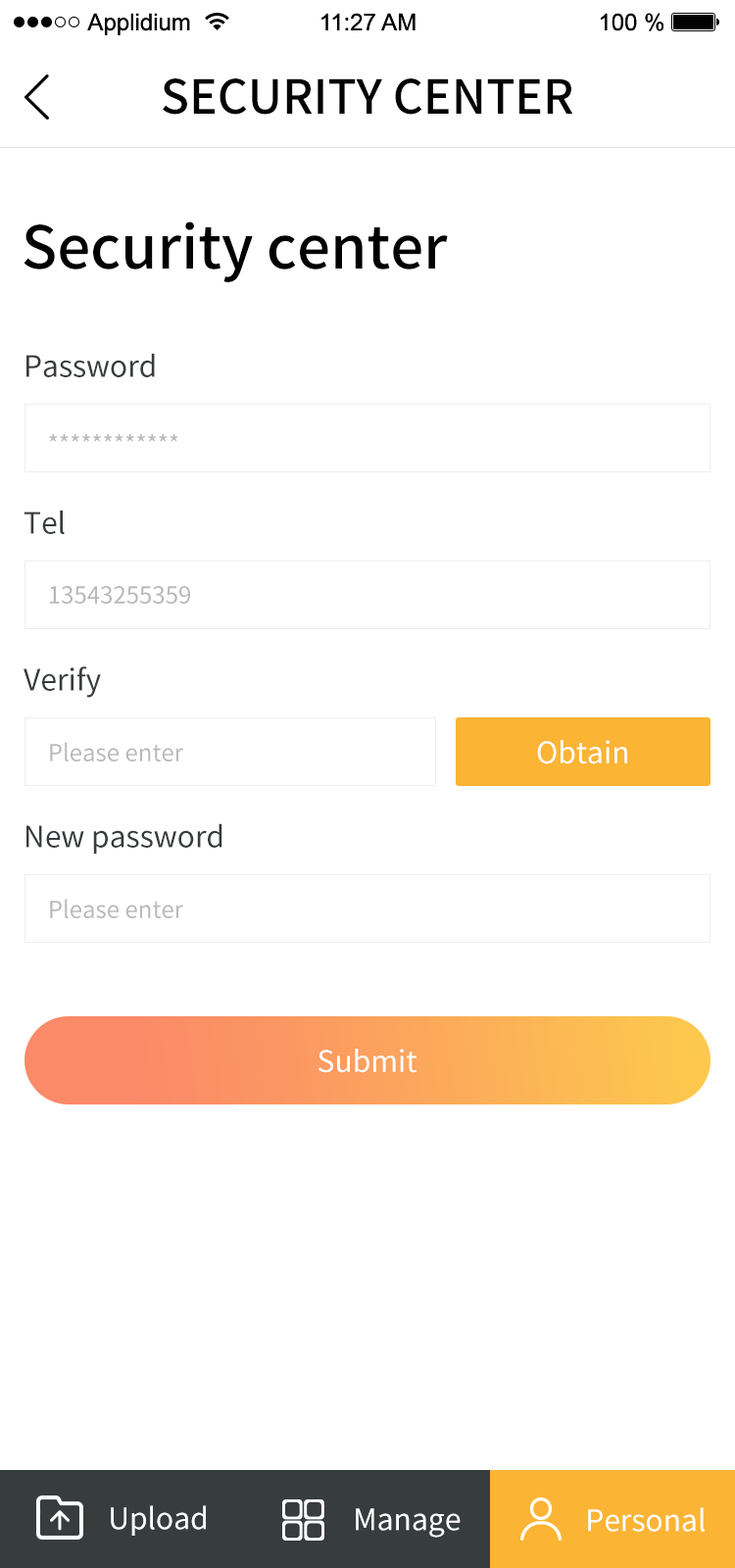
<style>
.page{position:relative;width:735px;height:1568px;background:#ffffff}
.page>*{position:absolute;margin:0}
.t1{font:47px "SourceHanSansCN-Medium";color:#010101;text-transform:uppercase}
.t2{font:58.8px "SourceHanSansCN-Medium";color:#010101}
.t3{font:29.4px "SourceHanSansCN-Regular";color:#373c3d}
.t4{font:23.5px "SourceHanSansCN-Regular";color:#b8b8b8}
.t5{font:29.4px "SourceHanSansCN-Regular";color:#ffffff}
</style>
<div class="page">
<p class="t1" style="left:163px;top:78px;width:410px;height:37px">Security center</p>
<p class="t2" style="left:24px;top:221px;width:424px;height:61px">Security center</p>
<p class="t3" style="left:26px;top:353px;width:129px;height:24px">Password</p>
<p class="t4" style="left:49px;top:433px;width:129px;height:9px">************</p>
<p class="t3" style="left:24px;top:510px;width:41px;height:24px">Tel</p>
<p class="t4" style="left:49px;top:586px;width:141px;height:18px">13543255359</p>
<p class="t3" style="left:24px;top:666px;width:77px;height:32px">Verify</p>
<p class="t4" style="left:50px;top:742px;width:133px;height:19px">Please enter</p>
<p class="t5" style="left:537px;top:740px;width:90px;height:24px">Obtain</p>
<p class="t3" style="left:26px;top:823px;width:196px;height:32px">New password</p>
<p class="t4" style="left:50px;top:899px;width:133px;height:19px">Please enter</p>
<p class="t5" style="left:318px;top:1049px;width:99px;height:24px">Submit</p>
<p class="t5" style="left:111px;top:1505px;width:95px;height:31px">Upload</p>
<p class="t5" style="left:356px;top:1508px;width:105px;height:30px">Manage</p>
<p class="t5" style="left:588px;top:1507px;width:118px;height:25px">Personal</p>
</div>
